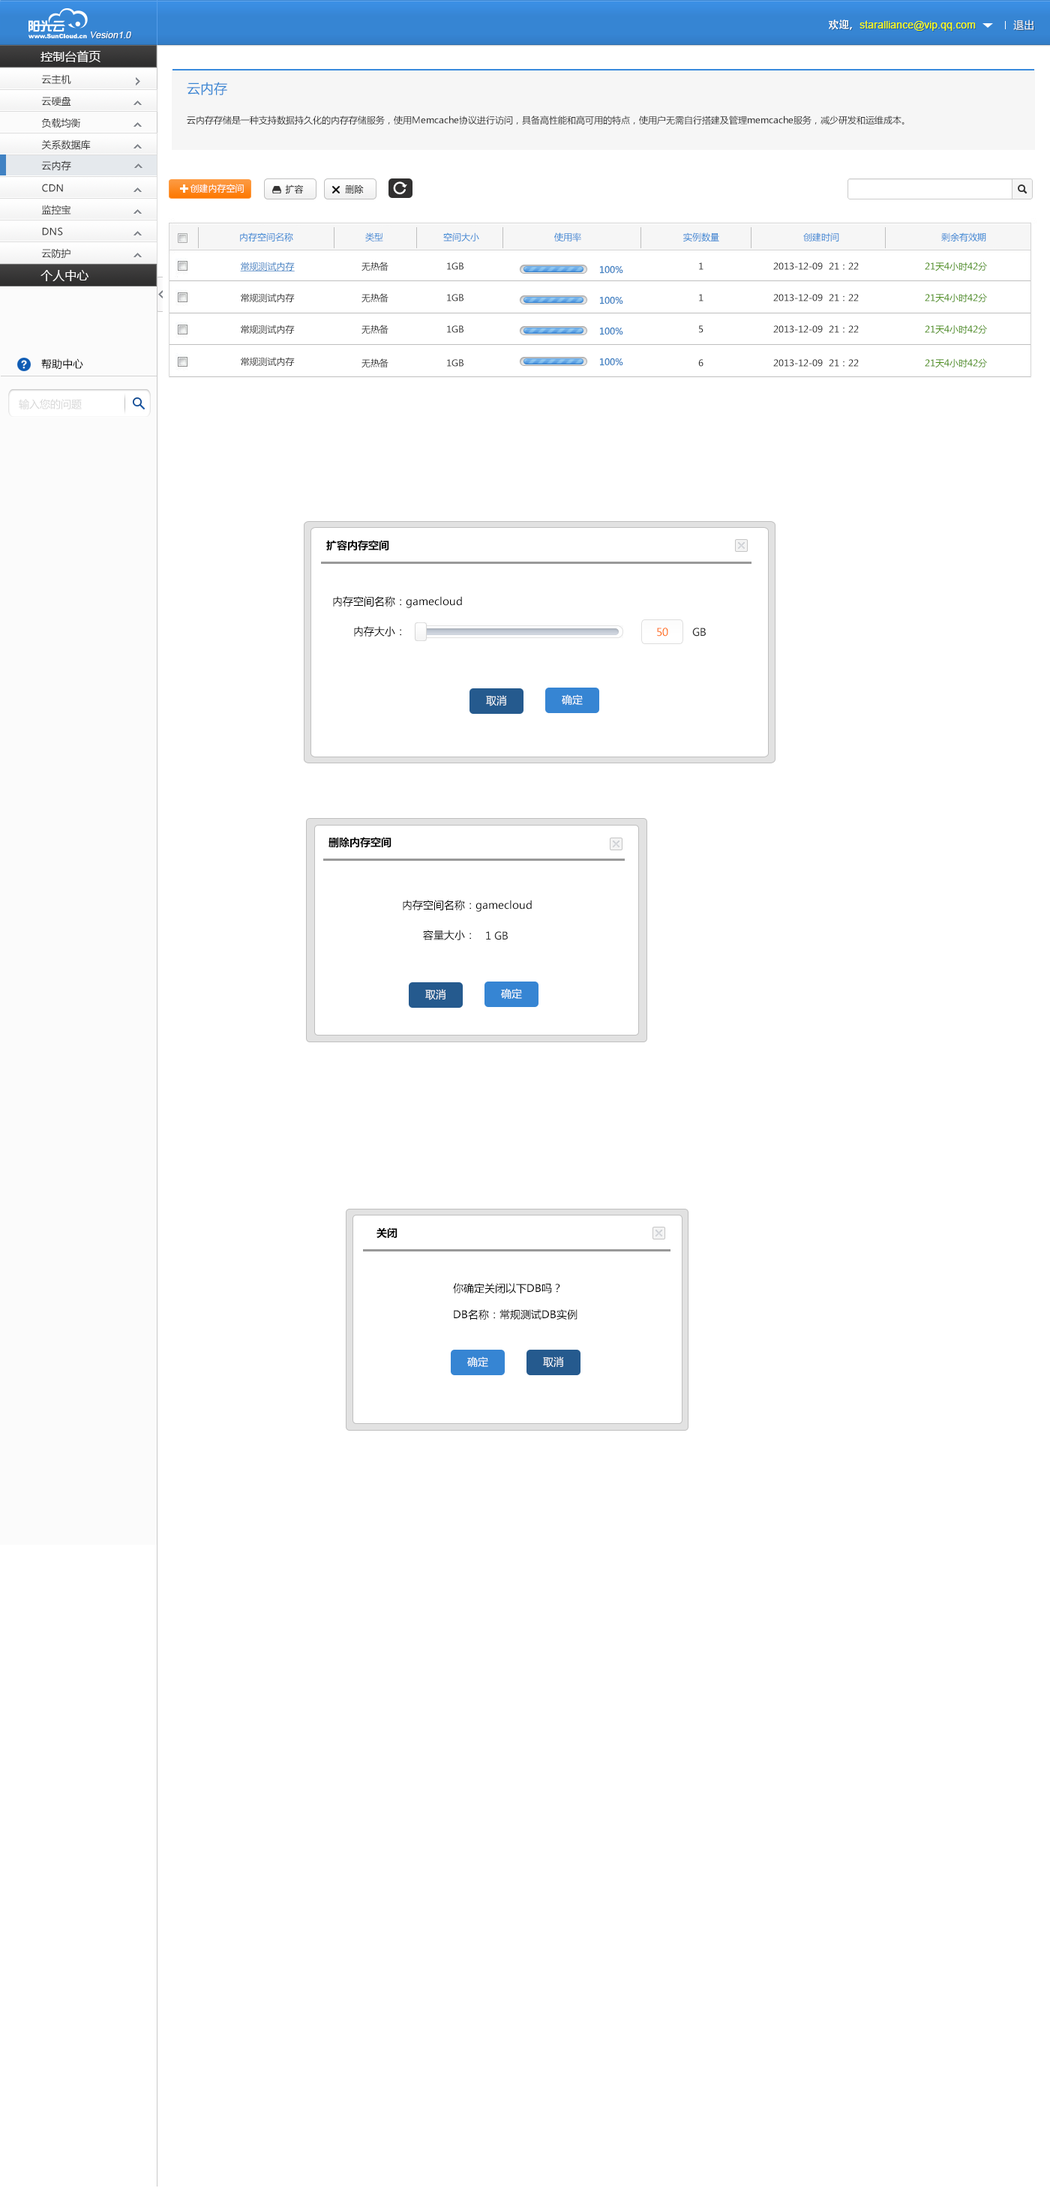
<style>
.page{position:relative;width:1050px;height:2206px;background:#ffffff}
.page>*{position:absolute;margin:0}
.t1{font:10.5px "ArialMT";color:#fcff0e}
.t2{font:10.5px "AdobeHeitiStd-Regular";color:#ffffff}
.t3{font:10.5px "MicrosoftYaHei";color:#ffffff}
.t4{font:9px "ArialMT";color:#ffffff;font-style:italic}
.t5{font:12px "MicrosoftYaHei";color:#ffffff}
.t6{font:9.8px "MicrosoftYaHei";color:#333333}
.t7{font:13.5px "MicrosoftYaHei";color:#3685d3}
.t8{font:9px "MicrosoftYaHei";color:#333333}
.t9{font:9px "MicrosoftYaHei";color:#fefefe}
.t10{font:9px "MicrosoftYaHei";color:#000000}
.t11{font:9px "MicrosoftYaHei";color:#3685d3}
.t12{font:9px "MicrosoftYaHei";color:#4182c3;text-decoration:underline}
.t13{font:9px "MicrosoftYaHei";color:#4182c3}
.t14{font:9px "MicrosoftYaHei"}
.t15{font:9px "MicrosoftYaHei";color:#488d0e}
.t16{font:10.5px "MicrosoftYaHei";color:#000000}
.t17{font:10.5px "MicrosoftYaHei";color:#d7d7d7}
.t18{font:10.5px "MicrosoftYaHei-Bold";color:#000000}
.t19{font:10.5px/30px "MicrosoftYaHei";color:#000000}
.t20{font:10.5px "MicrosoftYaHei";color:#ff6600}
.t21{font:10.5px "MicrosoftYaHei";color:#333333}
.t22{font:10.5px/26.2px "MicrosoftYaHei";color:#000000}
</style>
<div class="page">
<p class="t1" style="left:829px;top:20px;width:147px;height:11px"><span class="t2">欢迎，</span>staralliance@vip.qq.com</p>
<p class="t3" style="left:1013px;top:20px;width:21px;height:10px">退出</p>
<p class="t4" style="left:91px;top:32px;width:40px;height:6px">Vesion1.0</p>
<p class="t5" style="left:40px;top:50px;width:60px;height:13px">控制台首页</p>
<p class="t6" style="left:41px;top:74px;width:30px;height:11px">云主机</p>
<p class="t7" style="left:187px;top:82px;width:40px;height:13px">云内存</p>
<p class="t6" style="left:41px;top:96px;width:30px;height:10px">云硬盘</p>
<p class="t6" style="left:41px;top:118px;width:39px;height:10px">负载均衡</p>
<p class="t8" style="left:187px;top:116px;width:717px;height:9px">云内存存储是一种支持数据持久化的内存存储服务，使用Memcache协议进行访问，具备高性能和高可用的特点，使用户无需自行搭建及管理memcache服务，减少研发和运维成本。</p>
<p class="t6" style="left:41px;top:140px;width:50px;height:10px">关系数据库</p>
<p class="t6" style="left:41px;top:160px;width:30px;height:11px">云内存</p>
<p class="t6" style="left:42px;top:184px;width:21px;height:8px">CDN</p>
<p class="t9" style="left:190px;top:184px;width:54px;height:9px">创建内存空间</p>
<p class="t10" style="left:285px;top:184px;width:19px;height:10px">扩容</p>
<p class="t10" style="left:345px;top:184px;width:19px;height:10px">删除</p>
<p class="t6" style="left:41px;top:205px;width:30px;height:9px">监控宝</p>
<p class="t6" style="left:42px;top:227px;width:21px;height:9px">DNS</p>
<p class="t11" style="left:240px;top:232px;width:746px;height:10px">内存空间名称                        类型                    空间大小                         使用率                                  实例数量                            创建时间                                  剩余有效期</p>
<p class="t6" style="left:41px;top:248px;width:29px;height:11px">云防护</p>
<p class="t5" style="left:40px;top:270px;width:48px;height:11px">个人中心</p>
<p class="t12" style="left:240px;top:262px;width:55px;height:10px">常规测试内存</p>
<p class="t8" style="left:362px;top:262px;width:26px;height:10px">无热备</p>
<p class="t8" style="left:447px;top:262px;width:17px;height:8px">1GB</p>
<p class="t13" style="left:600px;top:266px;width:23px;height:8px">100%</p>
<p class="t14" style="left:699px;top:262px;width:5px;height:8px">1</p>
<p class="t8" style="left:773px;top:262px;width:86px;height:8px">2013-12-09  21：22</p>
<p class="t15" style="left:925px;top:262px;width:62px;height:10px">21天4小时42分</p>
<p class="t8" style="left:241px;top:293px;width:54px;height:10px">常规测试内存</p>
<p class="t8" style="left:362px;top:293px;width:26px;height:10px">无热备</p>
<p class="t8" style="left:447px;top:294px;width:17px;height:8px">1GB</p>
<p class="t14" style="left:699px;top:294px;width:5px;height:8px">1</p>
<p class="t8" style="left:773px;top:294px;width:86px;height:8px">2013-12-09  21：22</p>
<p class="t15" style="left:925px;top:293px;width:62px;height:10px">21天4小时42分</p>
<p class="t13" style="left:600px;top:296px;width:23px;height:8px">100%</p>
<p class="t8" style="left:241px;top:325px;width:54px;height:9px">常规测试内存</p>
<p class="t8" style="left:362px;top:325px;width:26px;height:9px">无热备</p>
<p class="t8" style="left:447px;top:326px;width:17px;height:7px">1GB</p>
<p class="t13" style="left:600px;top:327px;width:23px;height:8px">100%</p>
<p class="t8" style="left:699px;top:326px;width:5px;height:7px">5</p>
<p class="t8" style="left:773px;top:326px;width:86px;height:7px">2013-12-09  21：22</p>
<p class="t15" style="left:925px;top:325px;width:62px;height:9px">21天4小时42分</p>
<p class="t16" style="left:41px;top:358px;width:42px;height:12px">帮助中心</p>
<p class="t8" style="left:241px;top:357px;width:54px;height:10px">常规测试内存</p>
<p class="t8" style="left:362px;top:358px;width:26px;height:10px">无热备</p>
<p class="t8" style="left:447px;top:359px;width:17px;height:8px">1GB</p>
<p class="t13" style="left:600px;top:358px;width:23px;height:8px">100%</p>
<p class="t8" style="left:698px;top:359px;width:6px;height:8px">6</p>
<p class="t8" style="left:773px;top:359px;width:86px;height:8px">2013-12-09  21：22</p>
<p class="t15" style="left:925px;top:358px;width:62px;height:10px">21天4小时42分</p>
<p class="t17" style="left:19px;top:399px;width:63px;height:11px">输入您的问题</p>
<p class="t18" style="left:326px;top:540px;width:63px;height:11px">扩容内存空间</p>
<p class="t19" style="left:333px;top:596px;width:129px;height:41px">内存空间名称：gamecloud<br>       内存大小：</p>
<p class="t20" style="left:657px;top:628px;width:11px;height:9px">50</p>
<p class="t21" style="left:692px;top:628px;width:14px;height:9px">GB</p>
<p class="t3" style="left:486px;top:695px;width:21px;height:11px">取消</p>
<p class="t3" style="left:562px;top:694px;width:21px;height:12px">确定</p>
<p class="t18" style="left:328px;top:837px;width:64px;height:11px">删除内存空间</p>
<p class="t19" style="left:403px;top:900px;width:129px;height:40px">内存空间名称：gamecloud<br>       容量大小：</p>
<p class="t21" style="left:486px;top:932px;width:22px;height:8px">1 GB</p>
<p class="t3" style="left:425px;top:989px;width:21px;height:11px">取消</p>
<p class="t3" style="left:501px;top:988px;width:21px;height:12px">确定</p>
<p class="t18" style="left:376px;top:1228px;width:22px;height:11px">关闭</p>
<p class="t22" style="left:453px;top:1283px;width:125px;height:37px">你确定关闭以下DB吗？<br>DB名称：常规测试DB实例</p>
<p class="t3" style="left:467px;top:1357px;width:21px;height:11px">确定</p>
<p class="t3" style="left:543px;top:1357px;width:21px;height:11px">取消</p>
</div>
